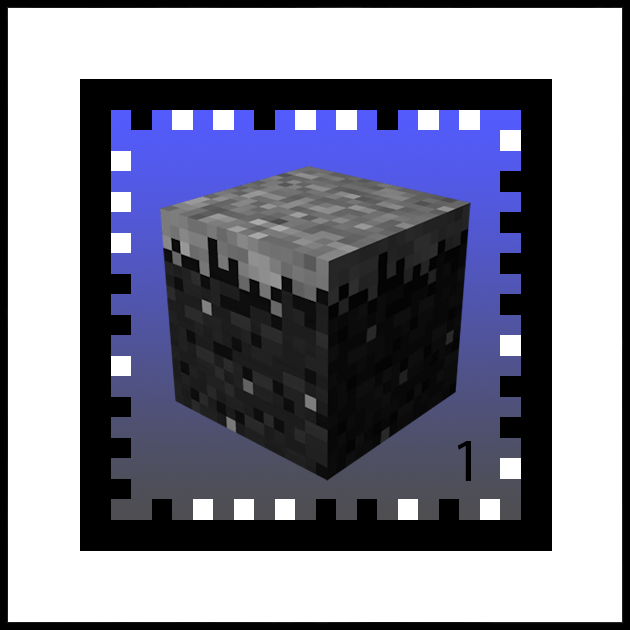
<style>
.page{position:relative;width:630px;height:630px;background:#ffffff}
.page>*{position:absolute;margin:0}
.t1{font:61.1px "MyriadPro-Regular";color:#000000;font-variant:small-caps}
</style>
<div class="page">
<p class="t1" style="left:457px;top:441px;width:14px;height:40px">1</p>
</div>
